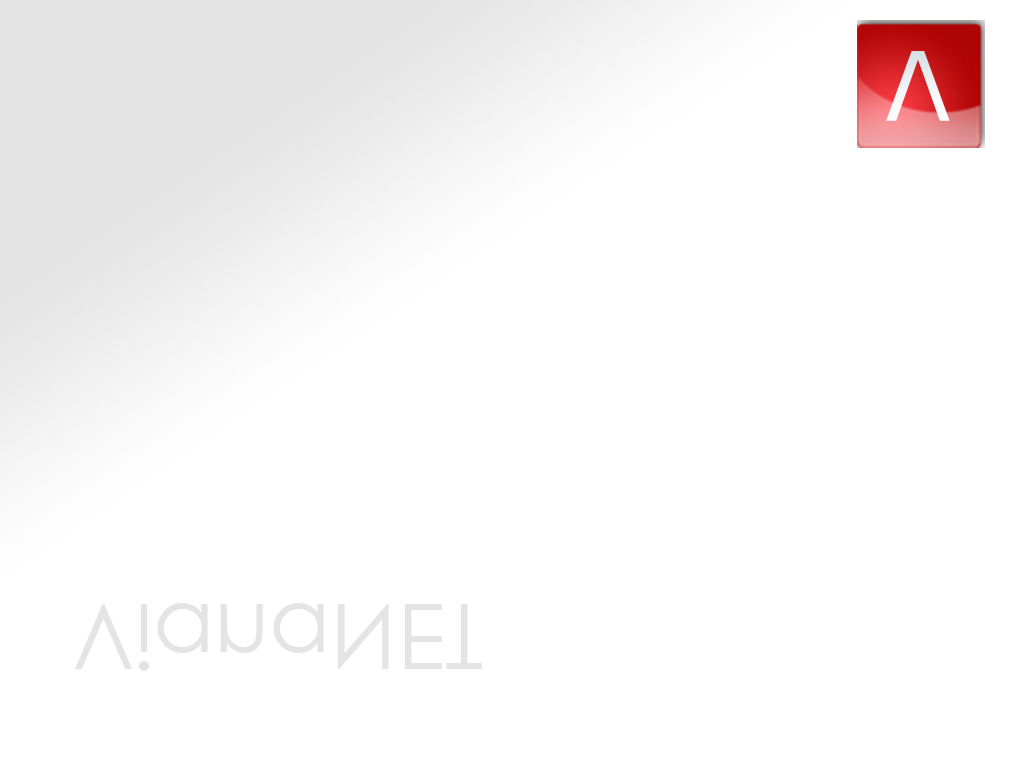
<style>
.page{position:relative;width:1024px;height:768px;background:#ffffff}
.page>*{position:absolute;margin:0}
.t1{font:89.6px "CenturyGothic";color:#e4e4e4}
</style>
<div class="page">
<p class="t1" style="left:75px;top:603px;width:407px;height:68px">VianaNET</p>
</div>
